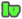
<style>
.page{position:relative;width:22px;height:19px;background:#ffffff}
.page>*{position:absolute;margin:0}
.t1{font:18px "BerlinSansFB-Bold";color:#59ff38}
</style>
<div class="page">
<p class="t1" style="left:3px;top:3px;width:16px;height:13px">lv</p>
</div>
